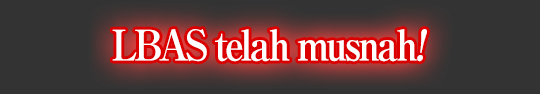
<style>
.page{position:relative;width:540px;height:94px;background:#333333}
.page>*{position:absolute;margin:0}
.t1{font:42px "RyuminPro-ExBold";letter-spacing:-0.08em;color:#ffffff;scale:0.9 1}
.t2{font:42px "RyuminPro-ExBold";letter-spacing:-0.08em;color:#ffffff;font-style:italic;scale:0.9 1}
</style>
<div class="page">
<p class="t1" style="left:112px;top:29px;width:315px;height:33px">LBAS telah musnah<span class="t2">!</span></p>
</div>
